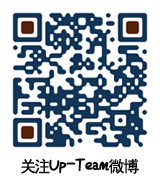
<style>
.page{position:relative;width:160px;height:180px;background:#ffffff}
.page>*{position:absolute;margin:0}
.t1{font:20px "FZMWJW--GB1-0";color:#0c0c0c;font-weight:bold}
.t2{font:16px "SimHei";color:#0c0c0c}
</style>
<div class="page">
<p class="t1" style="left:21px;top:158px;width:118px;height:16px"><span class="t2">关注</span>Up-Team<span class="t2">微博</span></p>
</div>
